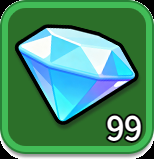
<style>
.page{position:relative;width:154px;height:159px;background:#2c6f29}
.page>*{position:absolute;margin:0}
.t1{font:32px "WebPSD-18463539-0-Regular";color:#ffffff;font-weight:bold}
</style>
<div class="page">
<p class="t1" style="left:87px;top:107px;width:57px;height:42px">99</p>
</div>
